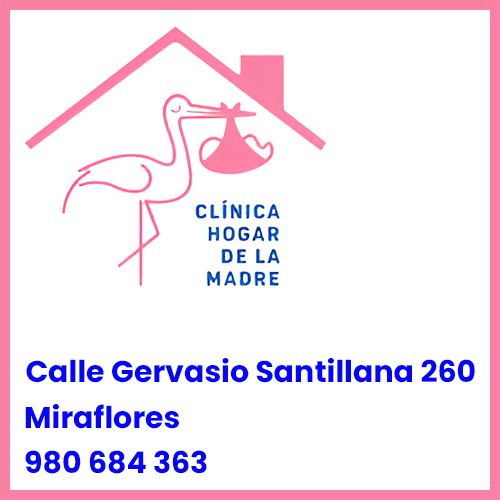
<style>
.page{position:relative;width:500px;height:500px;background:#ffffff}
.page>*{position:absolute;margin:0}
.t1{font:30px "Poppins-Bold";color:#0505fe}
</style>
<div class="page">
<p class="t1" style="left:26px;top:358px;width:449px;height:25px">Calle Gervasio Santillana 260</p>
<p class="t1" style="left:25px;top:404px;width:154px;height:25px">Miraflores</p>
<p class="t1" style="left:25px;top:450px;width:182px;height:24px">980 684 363</p>
</div>
